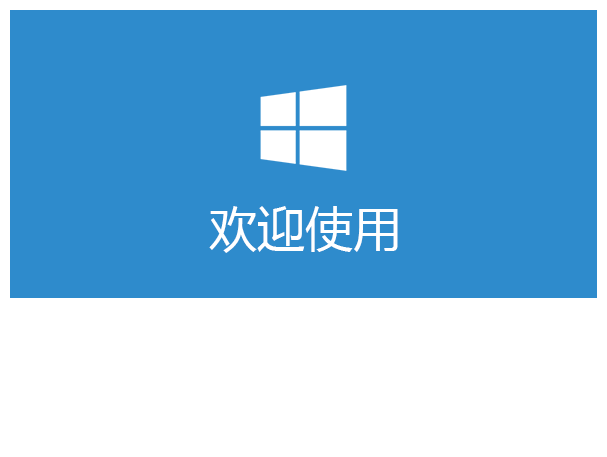
<style>
.page{position:relative;width:607px;height:457px;background:#2e8bcc}
.page>*{position:absolute;margin:0}
.t1{font:48px "MicrosoftYaHei";color:#ffffff}
</style>
<div class="page">
<p class="t1" style="left:209px;top:206px;width:189px;height:47px">欢迎使用</p>
</div>
